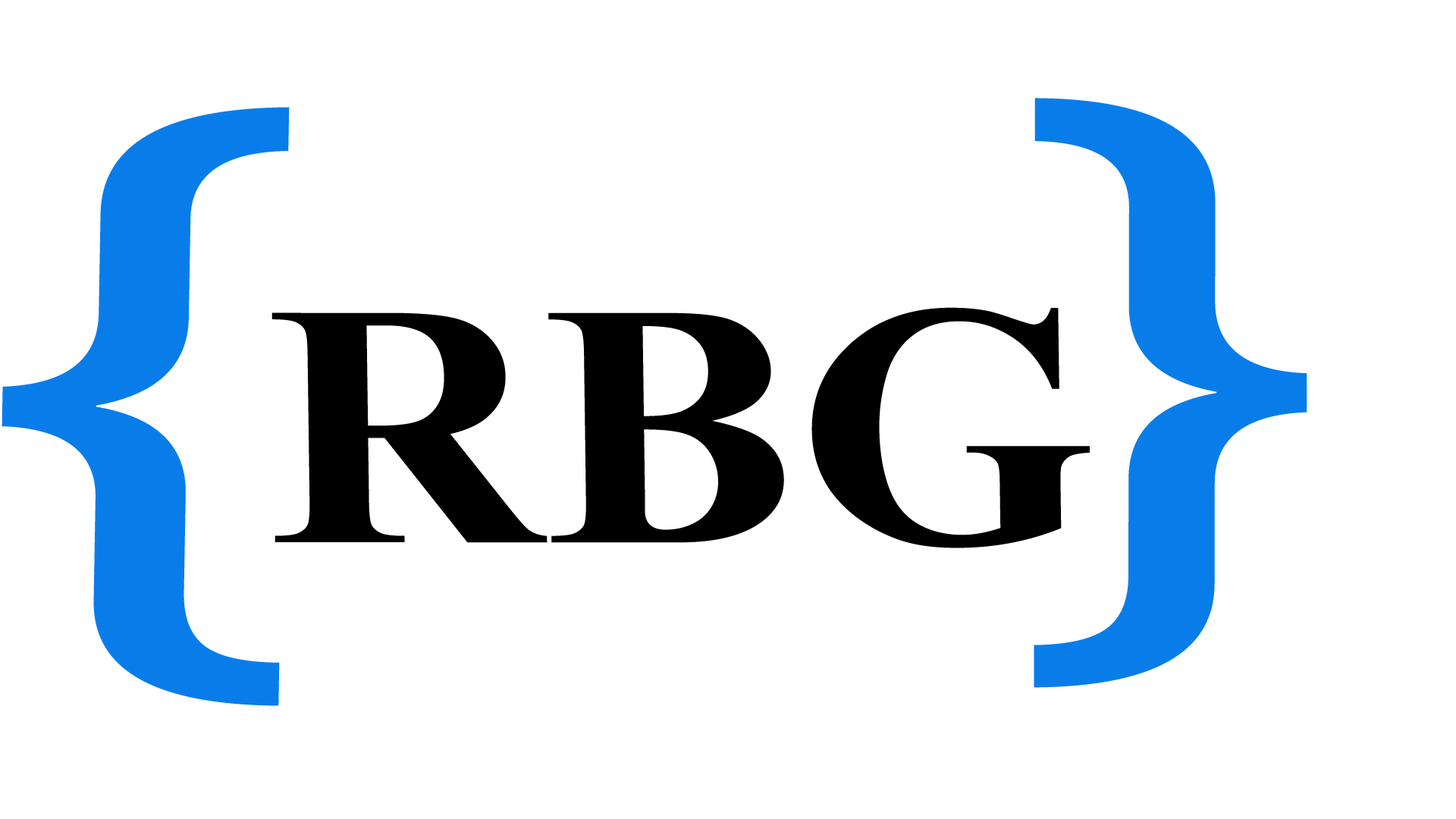
<style>
.page{position:relative;width:1456px;height:819px;background:#ffffff}
.page>*{position:absolute;margin:0}
.t1{font:685.5px "MicrosoftTaiLe";color:#087dea;scale:1.76 1}
.t2{font:696.2px "MicrosoftTaiLe";color:#087dea;scale:1.79 1}
.t3{font:346.1px "TimesNewRomanPS-BoldMT";color:#000000;scale:1.1 1}
</style>
<div class="page">
<p class="t1" style="left:1034px;top:98px;width:273px;height:590px">}</p>
<p class="t2" style="left:2px;top:107px;width:288px;height:599px">{</p>
<p class="t3" style="left:271px;top:307px;width:819px;height:241px">RBG</p>
</div>
